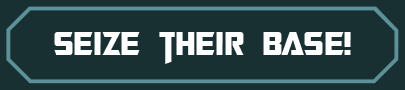
<style>
.page{position:relative;width:405px;height:90px;background:#193033}
.page>*{position:absolute;margin:0}
.t1{font:36px "TransformersMovie";letter-spacing:0.02em;color:#ffffff}
.t2{font:36px "TransformersMovie";letter-spacing:0.04em;color:#ffffff}
.t3{font:36px "TransformersMovie";letter-spacing:0.06em;color:#ffffff}
.t4{font:36px "TransformersMovie";color:#ffffff}
.t5{font:36px "TransformersMovie";letter-spacing:-0.02em;color:#ffffff}
</style>
<div class="page">
<p class="t1" style="left:54px;top:32px;width:297px;height:32px"><span class="t2">s</span>eize t<span class="t2">h</span>e<span class="t3">i</span>r<span class="t4"> b</span><span class="t5">a</span><span class="t2">s</span>e!</p>
</div>
